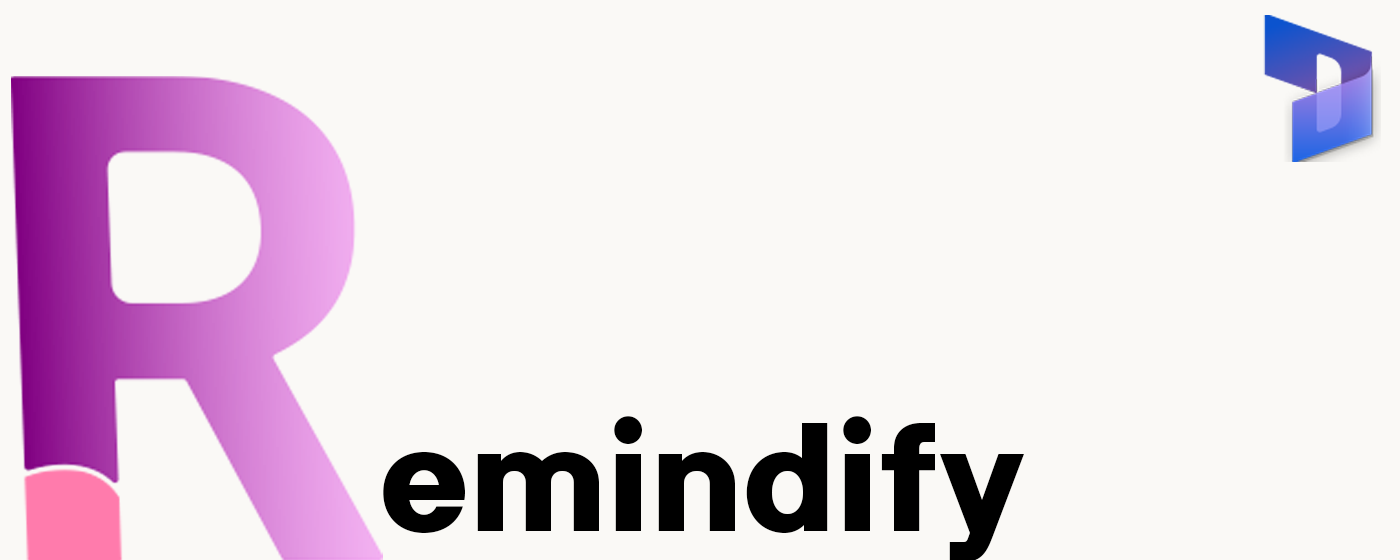
<style>
.page{position:relative;width:1400px;height:560px;background:#faf9f6}
.page>*{position:absolute;margin:0}
.t1{font:150px "Sublima-ExtraBold";color:#000000}
</style>
<div class="page">
<p class="t1" style="left:383px;top:416px;width:641px;height:146px">emindify</p>
</div>
